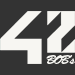
<style>
.page{position:relative;width:75px;height:75px;background:#333333}
.page>*{position:absolute;margin:0}
.t1{font:12.6px "BrushScriptStd";letter-spacing:-0.1em;color:#f7f6f2}
</style>
<div class="page">
<p class="t1" style="left:46px;top:55px;width:29px;height:9px">BOB’s</p>
</div>
